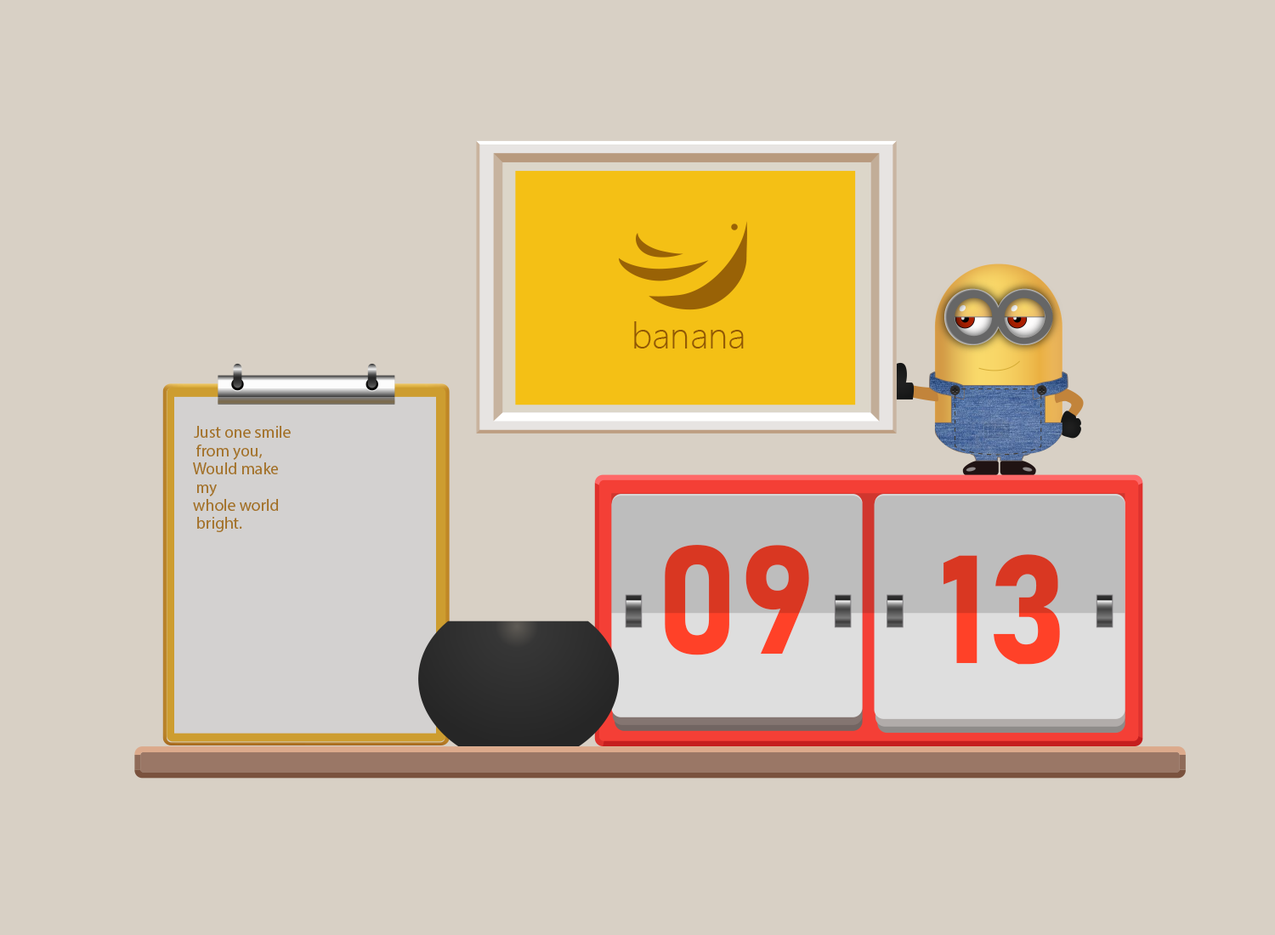
<style>
.page{position:relative;width:1275px;height:935px;background:#d8d0c5}
.page>*{position:absolute;margin:0}
.t1{font:34px "MicrosoftYaHeiUILight";color:#915805}
.t2{font:16.6px "MinionVariableConcept-Roman";color:#a27027}
.t3{font:151.1px "Bahnschrift-Bold"}
</style>
<div class="page">
<p class="t1" style="left:634px;top:321px;width:110px;height:28px">banana</p>
<p class="t2" style="left:194px;top:426px;width:97px;height:12px">Just one smile</p>
<p class="t2" style="left:196px;top:445px;width:66px;height:15px">from you,</p>
<p class="t2" style="left:193px;top:462px;width:85px;height:12px">Would make</p>
<p class="t2" style="left:197px;top:485px;width:20px;height:11px">my</p>
<p class="t2" style="left:193px;top:499px;width:85px;height:12px">whole world</p>
<p class="t2" style="left:197px;top:517px;width:45px;height:15px">bright.</p>
<p class="t3" style="left:665px;top:545px;width:144px;height:110px">09</p>
<p class="t3" style="left:944px;top:554px;width:116px;height:111px">13</p>
</div>
